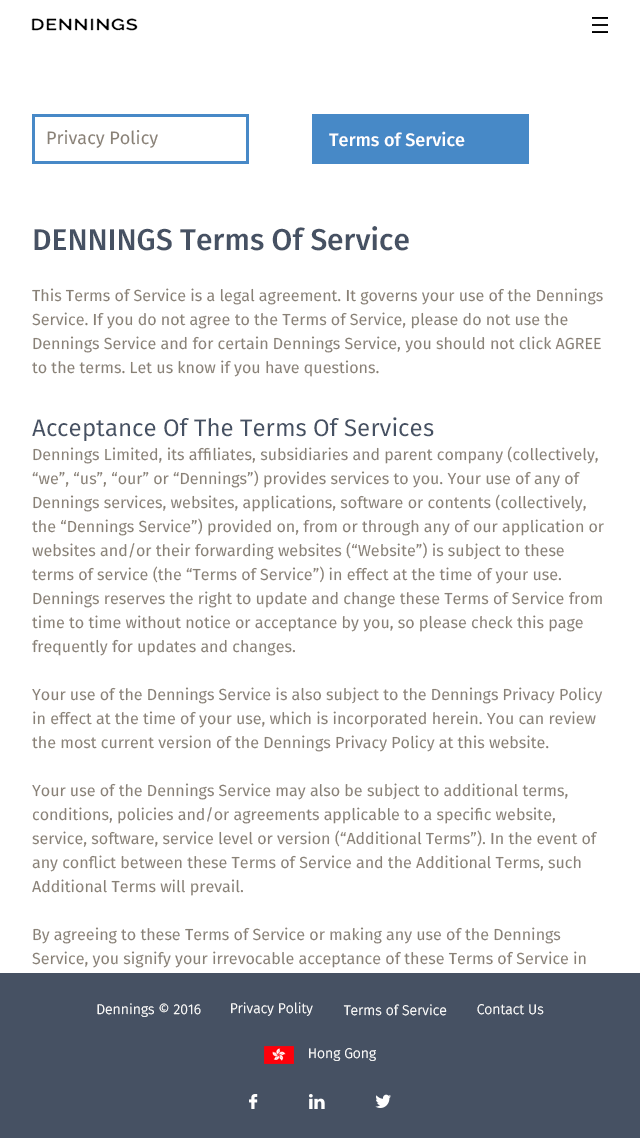
<style>
.page{position:relative;width:640px;height:1138px;background:#ffffff}
.page>*{position:absolute;margin:0}
.t1{font:18px "FiraSans-Regular";color:#898176}
.t2{font:18px "FiraSans-Medium";color:#fffefe}
.t3{font:16px/24px "FiraSans-Regular";color:#898176}
.t4{font:30px/48px "FiraSans-Medium";color:#465163}
.t5{font:24px/36px "FiraSans-Regular";color:#465163}
.t6{font:16px/24px "FiraSans-Regular";color:#1a1a1a}
.t7{font:18px/27px "FiraSans-Regular";color:#1a1a1a}
.t8{font:24px/36px "FiraSans-Regular";color:#1a1a1a}
.t9{font:14px "FiraSans-Light";color:#ffffff}
</style>
<div class="page">
<p class="t1" style="left:47px;top:130px;width:111px;height:18px">Privacy Policy</p>
<p class="t2" style="left:329px;top:131px;width:136px;height:16px">Terms of Service</p>
<p class="t3" style="left:32px;top:226px;width:572px;height:742px"><span class="t4">DENNINGS Terms Of Service<br><br></span>This Terms of Service is a legal agreement. It governs your use of the Dennings Service. If you do not agree to the Terms of Service, please do not use the Dennings Service and for certain Dennings Service, you should not click AGREE to the terms. Let us know if you have questions.<br><br><span class="t5">Acceptance Of The Terms Of Services<br></span>Dennings Limited, its affiliates, subsidiaries and parent company (collectively, “we”, “us”, “our” or “Dennings”) provides services to you. Your use of any of Dennings services, websites, applications, software or contents (collectively, the “Dennings Service”) provided on, from or through any of our application or websites and/or their forwarding websites (“Website”) is subject to these terms of service (the “Terms of Service”) in effect at the time of your use. Dennings reserves the right to update and change these Terms of Service from time to time without notice or acceptance by you, so please check this page frequently for updates and changes.<br><br>Your use of the Dennings Service is also subject to the Dennings Privacy Policy in effect at the time of your use, which is incorporated herein. You can review the most current version of the Dennings Privacy Policy at this website.<br><br>Your use of the Dennings Service may also be subject to additional terms, conditions, policies and/or agreements applicable to a specific website, service, software, service level or version (“Additional Terms”). In the event of any conflict between these Terms of Service and the Additional Terms, such Additional Terms will prevail.<br><br>By agreeing to these Terms of Service or making any use of the Dennings Service, you signify your irrevocable acceptance of these Terms of Service in <span class="t6">effect at the time of your use. If you are an individual acting as a representative of a corporation or1the Dennings Service, then you represent </span><span class="t7">and agree that you have the authority to accept these Terms of Service on behalf of such corporation or other legal entity and that all provisions of these Terms of Service will bind that corporation or other legal entity in place of you.<br><br></span><span class="t8">Your Account<br></span><span class="t7">The Dennings Service is not intended for users under the age of eighteen (18). By signifying your acceptance of these Terms of Service or making any use of the Dennings Service, you represent and warrant that you are at least eighteen (18) years of age.<br><br>You may be required to register, or previously registered, for a Dennings account in order to access the functionality of some of the Dennings Service. Dennings can refuse registration of, or cancel, any account in its sole discretion at any time without reason, notice or liability.</span></p>
<p class="t9" style="left:97px;top:1003px;width:104px;height:14px">Dennings © 2016</p>
<p class="t9" style="left:231px;top:1002px;width:82px;height:14px">Privacy Polity</p>
<p class="t9" style="left:343px;top:1004px;width:104px;height:12px">Terms of Service</p>
<p class="t9" style="left:477px;top:1004px;width:67px;height:11px">Contact Us</p>
<p class="t9" style="left:309px;top:1048px;width:67px;height:13px">Hong Gong</p>
</div>
